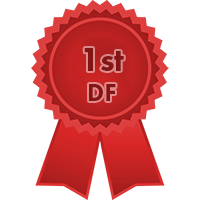
<style>
.page{position:relative;width:200px;height:200px;background:#ffffff}
.page>*{position:absolute;margin:0}
.t1{font:33.3px "FuturaPT-Heavy";color:#851414}
.t2{font:25px "FuturaPT-Heavy";color:#851414}
</style>
<div class="page">
<p class="t1" style="left:84px;top:48px;width:40px;height:53px;text-align:center">1st<br><span class="t2">DF</span></p>
</div>
